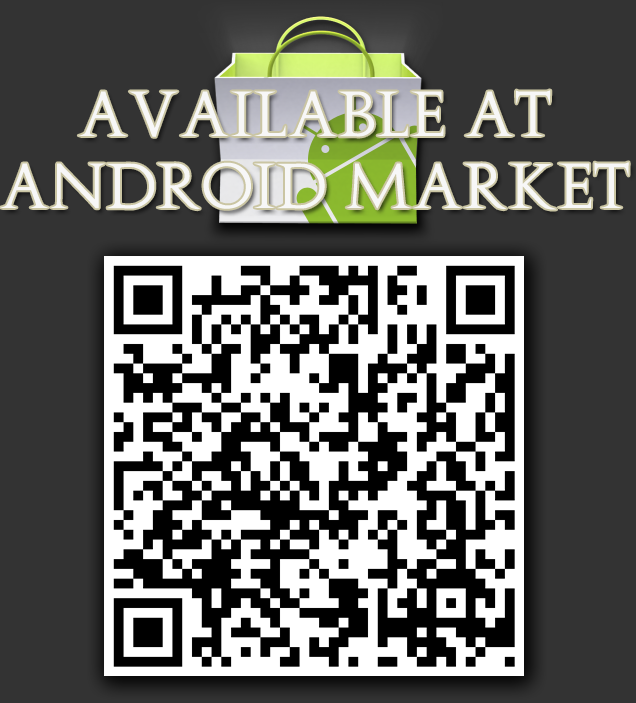
<style>
.page{position:relative;width:636px;height:703px;background:#333333}
.page>*{position:absolute;margin:0}
.t1{font:60px "Augustus";color:#f7f7f7}
</style>
<div class="page">
<p class="t1" style="left:0px;top:90px;width:629px;height:120px;text-align:center">Available at<br>Android Market</p>
</div>
